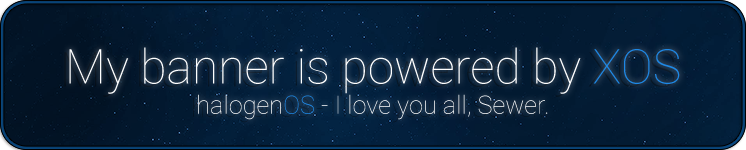
<style>
.page{position:relative;width:746px;height:150px}
.page>*{position:absolute;margin:0}
.t1{font:25.3px "Roboto-Thin";color:#ffffff}
.t2{font:48px "Roboto-Thin";color:#ffffff}
.t3{font:48px "Roboto-Thin";color:#1e88e5}
.t4{font:25.3px "Roboto-Thin";color:#1e88e5}
</style>
<div class="page">
<p class="t1" style="left:69px;top:47px;width:611px;height:73px;text-align:center"><span class="t2">My banner is powered by </span><span class="t3">XOS<br></span>halogen<span class="t4">OS </span>- I love you all, Sewer.</p>
</div>
